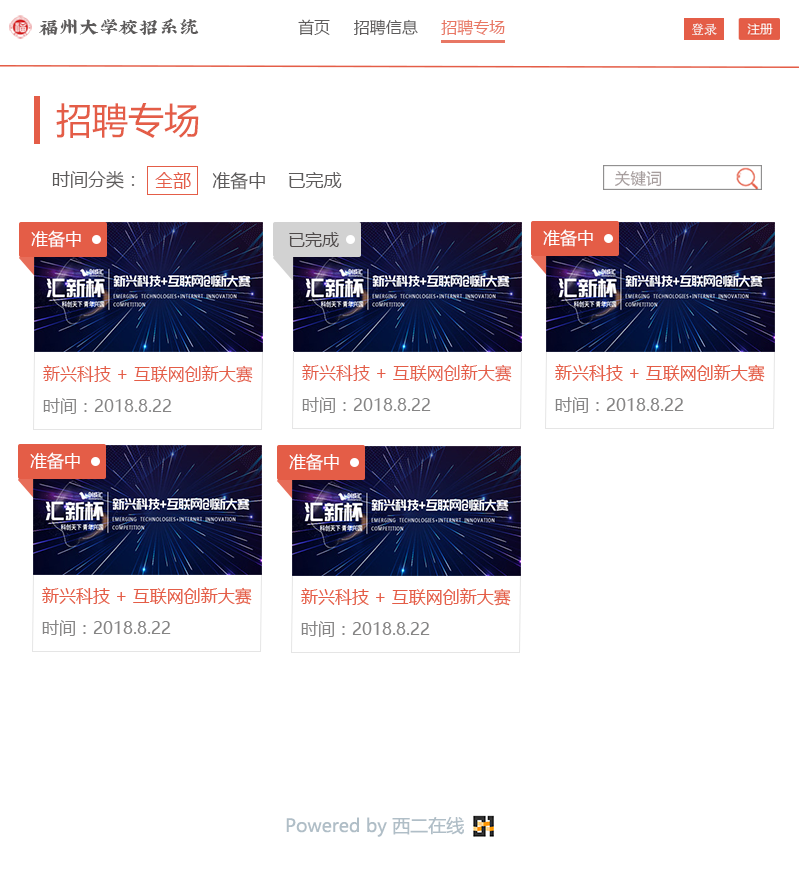
<style>
.page{position:relative;width:800px;height:888px;background:#ffffff}
.page>*{position:absolute;margin:0}
.t1{font:20px "XiQuezhaopaiti-Regular";color:#5d5b5b}
.t2{font:16px "MicrosoftYaHei";color:#5d5b5b}
.t3{font:16px "MicrosoftYaHei";color:#e87764}
.t4{font:36px "MicrosoftYaHei";color:#e45d47}
.t5{font:18px "MicrosoftYaHei";color:#5d5b5b}
.t6{font:18px "MicrosoftYaHei";color:#e45d47}
.t7{font:15.6px "MicrosoftYaHei";color:#a69d9d}
.t8{font:17px "MicrosoftYaHei";color:#ffffff}
.t9{font:17px "MicrosoftYaHei";color:#4f4a4a}
.t10{font:17px "MicrosoftYaHei";color:#e45d47}
.t11{font:17px "MicrosoftYaHei";color:#868585}
.t12{font:18px "MicrosoftYaHei";color:#b0bec7}
</style>
<div class="page">
<p class="t1" style="left:39px;top:18px;width:160px;height:18px">福州大学校招系统</p>
<p class="t2" style="left:298px;top:19px;width:207px;height:17px">首页     招聘信息     <span class="t3">招聘专场</span></p>
<p class="t4" style="left:56px;top:103px;width:143px;height:35px">招聘专场</p>
<p class="t5" style="left:52px;top:171px;width:83px;height:18px">时间分类：</p>
<p class="t5" style="left:155px;top:172px;width:187px;height:18px"><span class="t6">全部</span>    准备中    已完成</p>
<p class="t7" style="left:615px;top:170px;width:47px;height:17px">关键词</p>
<p class="t8" style="left:31px;top:230px;width:50px;height:18px">准备中</p>
<p class="t9" style="left:289px;top:232px;width:50px;height:15px">已完成</p>
<p class="t10" style="left:43px;top:365px;width:210px;height:18px">新兴科技 + 互联网创新大赛</p>
<p class="t10" style="left:302px;top:364px;width:210px;height:18px">新兴科技 + 互联网创新大赛</p>
<p class="t11" style="left:43px;top:398px;width:129px;height:16px">时间：2018.8.22</p>
<p class="t11" style="left:302px;top:397px;width:129px;height:16px">时间：2018.8.22</p>
<p class="t12" style="left:286px;top:816px;width:178px;height:21px">Powered by 西二在线</p>
</div>
